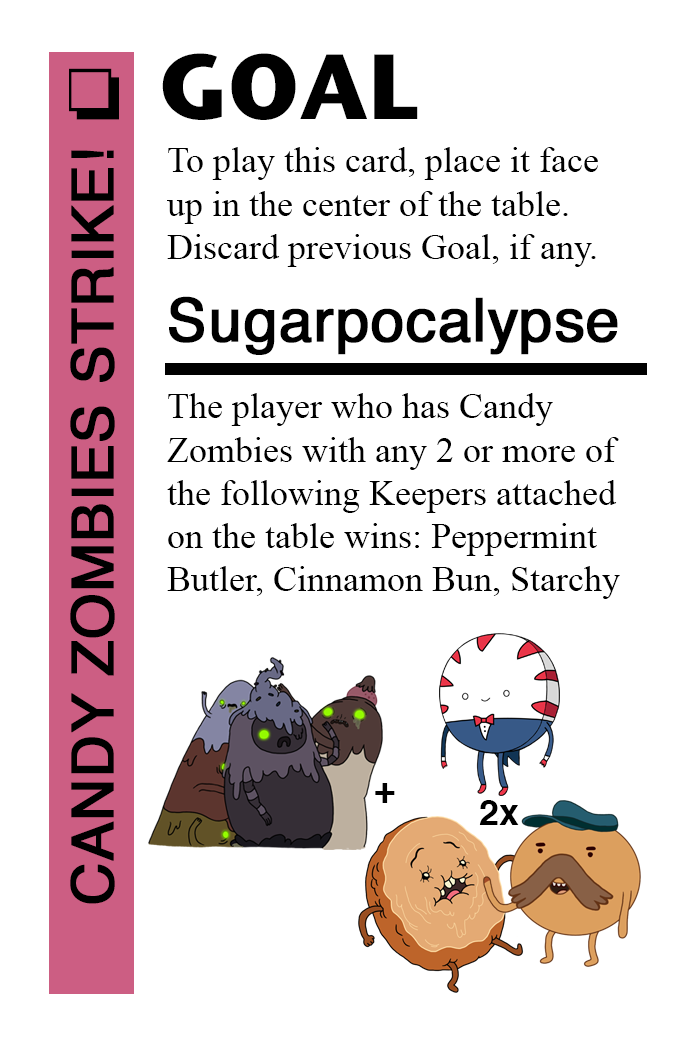
<style>
.page{position:relative;width:700px;height:1042px;background:#ffffff}
.page>*{position:absolute;margin:0}
.t1{font:92px "StoneSansITC-Bold";color:#000000}
.t2{font:72px "MS-Gothic";color:#000000}
.t3{font:58px "Helvetica";color:#000000;font-weight:bold}
.t4{font:36px "TimesNewRomanPSMT";color:#000000}
.t5{font:60px "Helvetica";color:#000000;font-weight:bold}
.t6{font:36px "Helvetica-Bold";color:#000000}
</style>
<div class="page">
<p class="t1" style="left:162px;top:53px;width:256px;height:67px">GOAL</p>
<p class="t2" style="left:69px;top:68px;width:50px;height:52px">❏</p>
<p class="t3" style="left:70px;top:150px;width:45px;height:754px;rotate:-90deg">CANDY ZOMBIES STRIKE!</p>
<p class="t4" style="left:167px;top:147px;width:431px;height:120px">To play this card, place it face<br>up in the center of the table.<br>Discard previous Goal, if any.</p>
<p class="t5" style="left:169px;top:296px;width:449px;height:59px">Sugarpocalypse</p>
<p class="t4" style="left:167px;top:393px;width:453px;height:206px">The player who has Candy<br>Zombies with any 2 or more of<br>the following Keepers attached <br>on the table wins: Peppermint<br>Butler, Cinnamon Bun, Starchy</p>
<p class="t6" style="left:375px;top:783px;width:20px;height:20px">+</p>
<p class="t6" style="left:479px;top:800px;width:40px;height:25px">2x</p>
</div>
